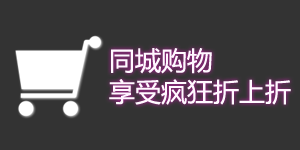
<style>
.page{position:relative;width:300px;height:150px;background:#333333}
.page>*{position:absolute;margin:0}
.t1{font:26px "MicrosoftYaHei";color:#ffe9ff}
</style>
<div class="page">
<p class="t1" style="left:109px;top:48px;width:182px;height:57px">同城购物<br>享受疯狂折上折</p>
</div>
